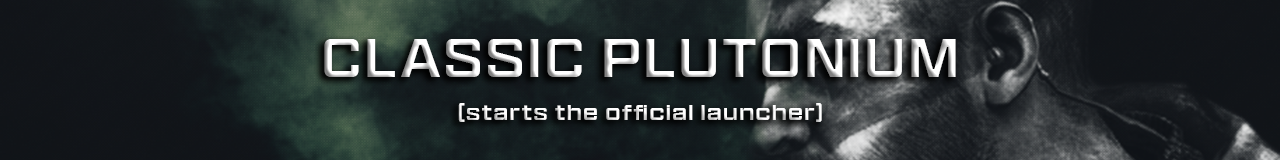
<style>
.page{position:relative;width:1280px;height:160px}
.page>*{position:absolute;margin:0}
.t1{font:50px "HitmarkerNormal-Regular";letter-spacing:0.12em}
.t2{font:20px "HitmarkerNormal-Regular";letter-spacing:0.12em;color:#ffffff}
</style>
<div class="page">
<p class="t1" style="left:324px;top:39px;width:632px;height:38px">CLASSIC PLUTONIUM</p>
<p class="t2" style="left:458px;top:103px;width:364px;height:19px">(starts the official launcher)</p>
</div>
